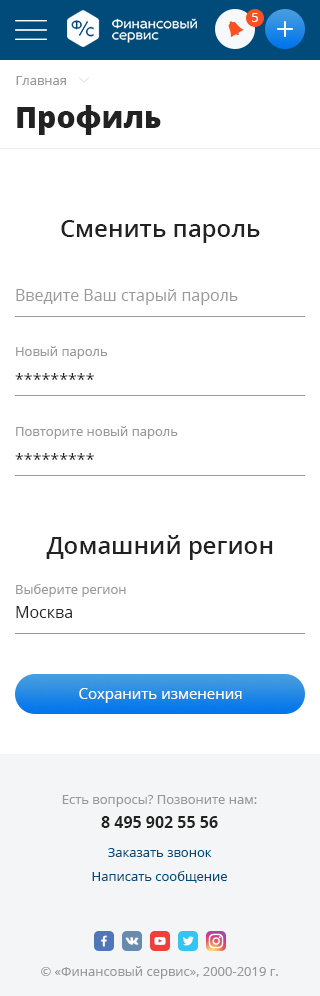
<style>
.page{position:relative;width:320px;height:996px;background:#ffffff}
.page>*{position:absolute;margin:0}
.t1{font:13px "OpenSans";color:#ffffff}
.t2{font:13px "OpenSans";color:#999999}
.t3{font:30px "OpenSans-Extrabold";color:#222222}
.t4{font:24px "OpenSans-Semibold";color:#222222}
.t5{font:16px "OpenSans";color:#999999}
.t6{font:16px/30px "OpenSans";color:#222222}
.t7{font:16px/24px "OpenSans";color:#222222}
.t8{font:15px "OpenSans";color:#ffffff}
.t9{font:13px/24px "OpenSans";color:#999999}
.t10{font:16px/24px "OpenSans-Bold";color:#222222}
.t11{font:13px/24px "OpenSans";color:#004b7a}
</style>
<div class="page">
<p class="t1" style="left:252px;top:13px;width:6px;height:9px">5</p>
<p class="t2" style="left:16px;top:76px;width:50px;height:9px">Главная</p>
<p class="t3" style="left:17px;top:105px;width:144px;height:30px">Профиль</p>
<p class="t4" style="left:61px;top:220px;width:199px;height:23px">Сменить пароль</p>
<p class="t5" style="left:16px;top:289px;width:222px;height:16px"><span class="t2"> <br></span>Введите Ваш старый пароль</p>
<p class="t2" style="left:15px;top:346px;width:93px;height:34px">Новый пароль<br><span class="t6">*********</span></p>
<p class="t2" style="left:15px;top:426px;width:163px;height:34px">Повторите новый пароль<br><span class="t6">*********</span></p>
<p class="t4" style="left:46px;top:535px;width:227px;height:25px">Домашний регион</p>
<p class="t2" style="left:16px;top:584px;width:110px;height:34px">Выберите регион<br><span class="t7">Москва</span></p>
<p class="t8" style="left:79px;top:688px;width:163px;height:15px">Сохранить изменения</p>
<p class="t9" style="left:62px;top:795px;width:195px;height:33px;text-align:center">Есть вопросы? Позвоните нам:<br><span class="t10">8 495 902 55 56</span></p>
<p class="t11" style="left:92px;top:848px;width:135px;height:35px;text-align:center">Заказать звонок          <br>Написать сообщение</p>
<p class="t2" style="left:41px;top:966px;width:237px;height:13px">© «Финансовый сервис», 2000-2019 г.</p>
</div>
